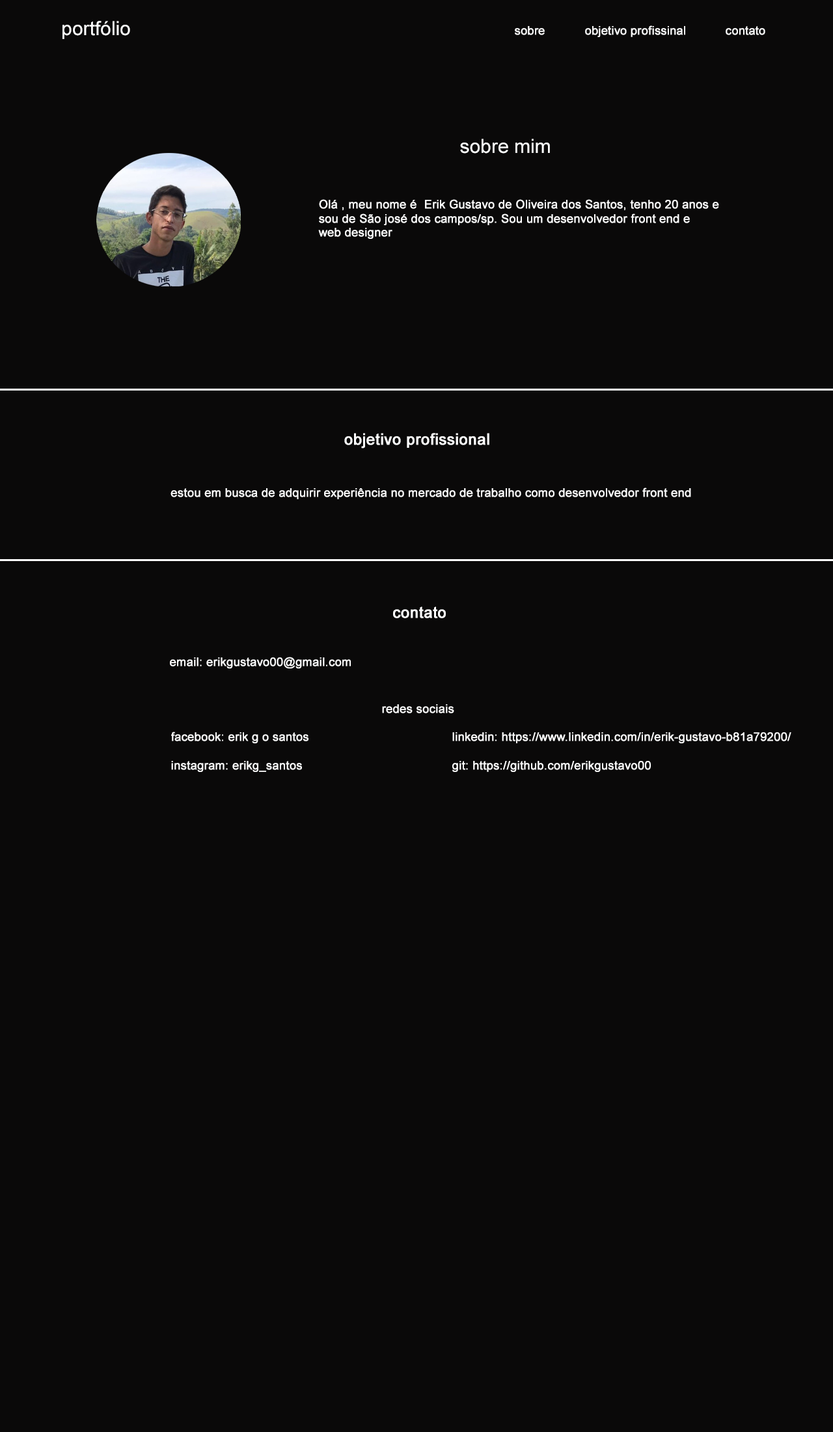
<style>
.page{position:relative;width:833px;height:1432px;background:#0a0909}
.page>*{position:absolute;margin:0}
.t1{font:19.5px "ArialMT";color:#ffffff}
.t2{font:11.7px "ArialMT";color:#ffffff;font-weight:bold}
.t3{font:15.6px "ArialMT";color:#ffffff;font-weight:bold}
</style>
<div class="page">
<p class="t1" style="left:62px;top:21px;width:68px;height:18px">portfólio</p>
<p class="t2" style="left:515px;top:25px;width:250px;height:12px">sobre  objetivo profissinal  contato</p>
<p class="t1" style="left:460px;top:139px;width:90px;height:15px">sobre mim</p>
<p class="t2" style="left:318px;top:199px;width:401px;height:40px">Olá , meu nome é  Erik Gustavo de Oliveira dos Santos, tenho 20 anos e <br>sou de São josé dos campos/sp. Sou um desenvolvedor front end e<br>web designer</p>
<p class="t3" style="left:344px;top:433px;width:145px;height:15px">objetivo profissional</p>
<p class="t2" style="left:170px;top:487px;width:521px;height:12px">estou em busca de adquirir experiência no mercado de trabalho como desenvolvedor front end</p>
<p class="t3" style="left:393px;top:606px;width:53px;height:12px">contato</p>
<p class="t2" style="left:170px;top:657px;width:181px;height:11px">email: erikgustavo00@gmail.com</p>
<p class="t2" style="left:171px;top:704px;width:620px;height:68px">redes sociais<br><br>facebook: erik g o santos       linkedin: https://www.linkedin.com/in/erik-gustavo-b81a79200/<br><br>instagram: erikg_santos       git: https://github.com/erikgustavo00</p>
</div>
